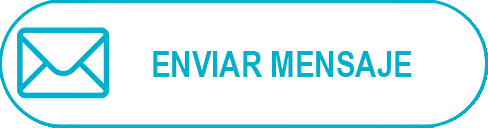
<style>
.page{position:relative;width:488px;height:128px;background:#ffffff}
.page>*{position:absolute;margin:0}
.t1{font:36px "ArialNarrow-Bold";color:#00afcb}
</style>
<div class="page">
<p class="t1" style="left:153px;top:51px;width:259px;height:26px">ENVIAR MENSAJE</p>
</div>
